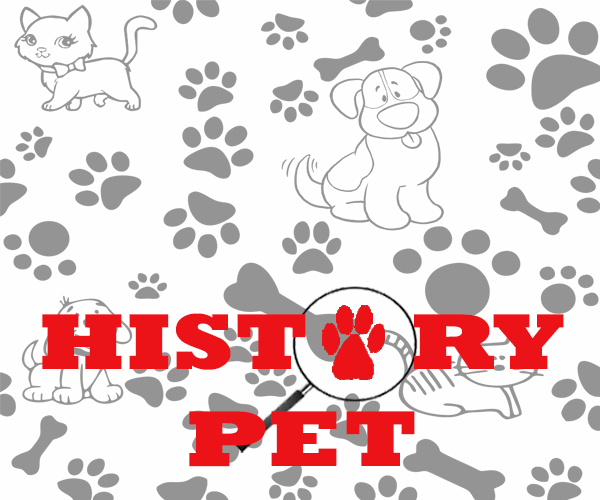
<style>
.page{position:relative;width:600px;height:500px;background:#fefefe}
.page>*{position:absolute;margin:0}
.t1{font:80.5px "Rockwell-ExtraBold";color:#eb1318;scale:1.25 1}
</style>
<div class="page">
<p class="t1" style="left:42px;top:313px;width:522px;height:154px;text-align:center">HIST    RY<br>PET</p>
</div>
